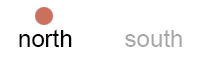
<style>
.page{position:relative;width:200px;height:60px;background:#ffffff}
.page>*{position:absolute;margin:0}
.t1{font:24px "ArialMT";color:#000000}
.t2{font:24px "ArialMT";color:#a6a6a6}
</style>
<div class="page">
<p class="t1" style="left:19px;top:29px;width:53px;height:18px">north</p>
<p class="t2" style="left:125px;top:29px;width:57px;height:18px">south</p>
</div>
